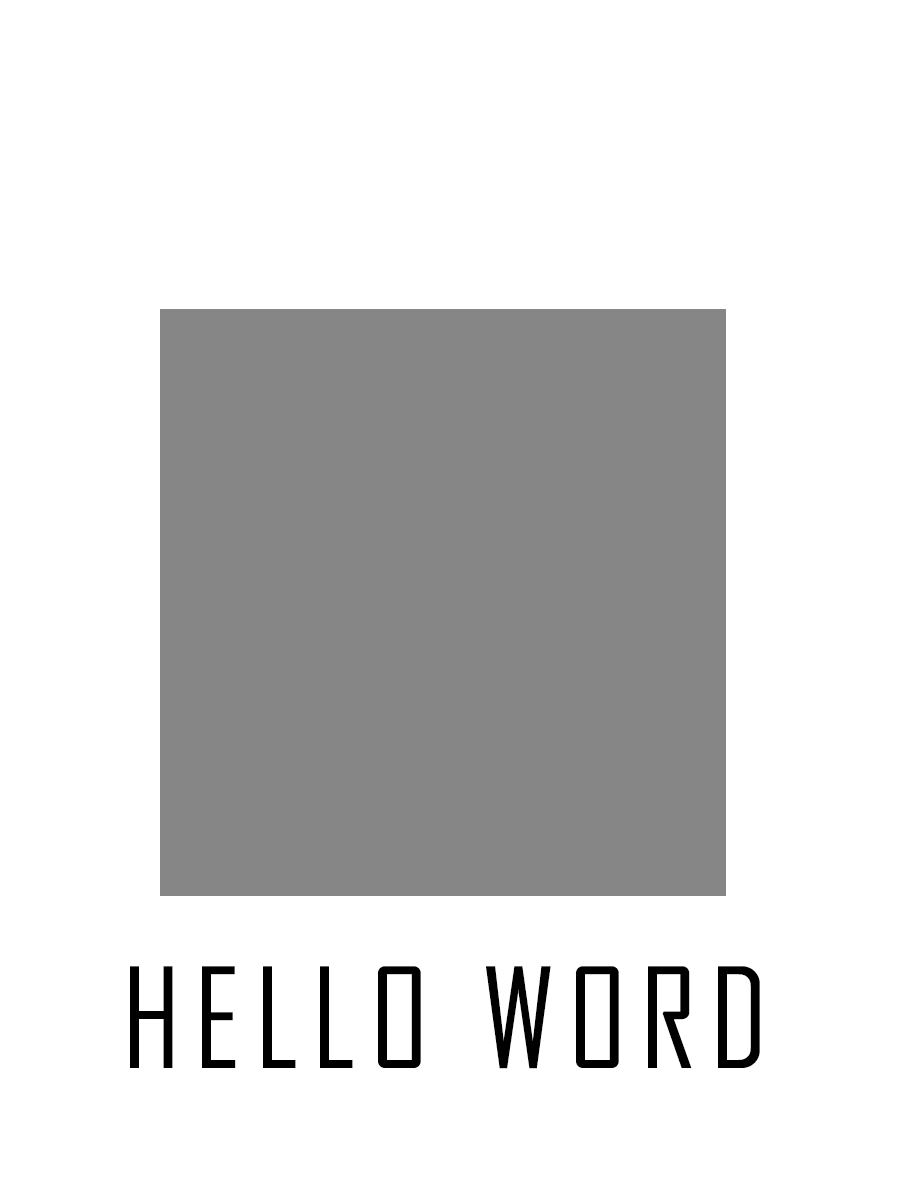
<style>
.page{position:relative;width:900px;height:1200px;background:#ffffff}
.page>*{position:absolute;margin:0}
.t1{font:133.1px "AgencyFB-Reg";letter-spacing:0.1em;color:#000000}
</style>
<div class="page">
<p class="t1" style="left:130px;top:966px;width:630px;height:103px">HELLO WORD</p>
</div>
